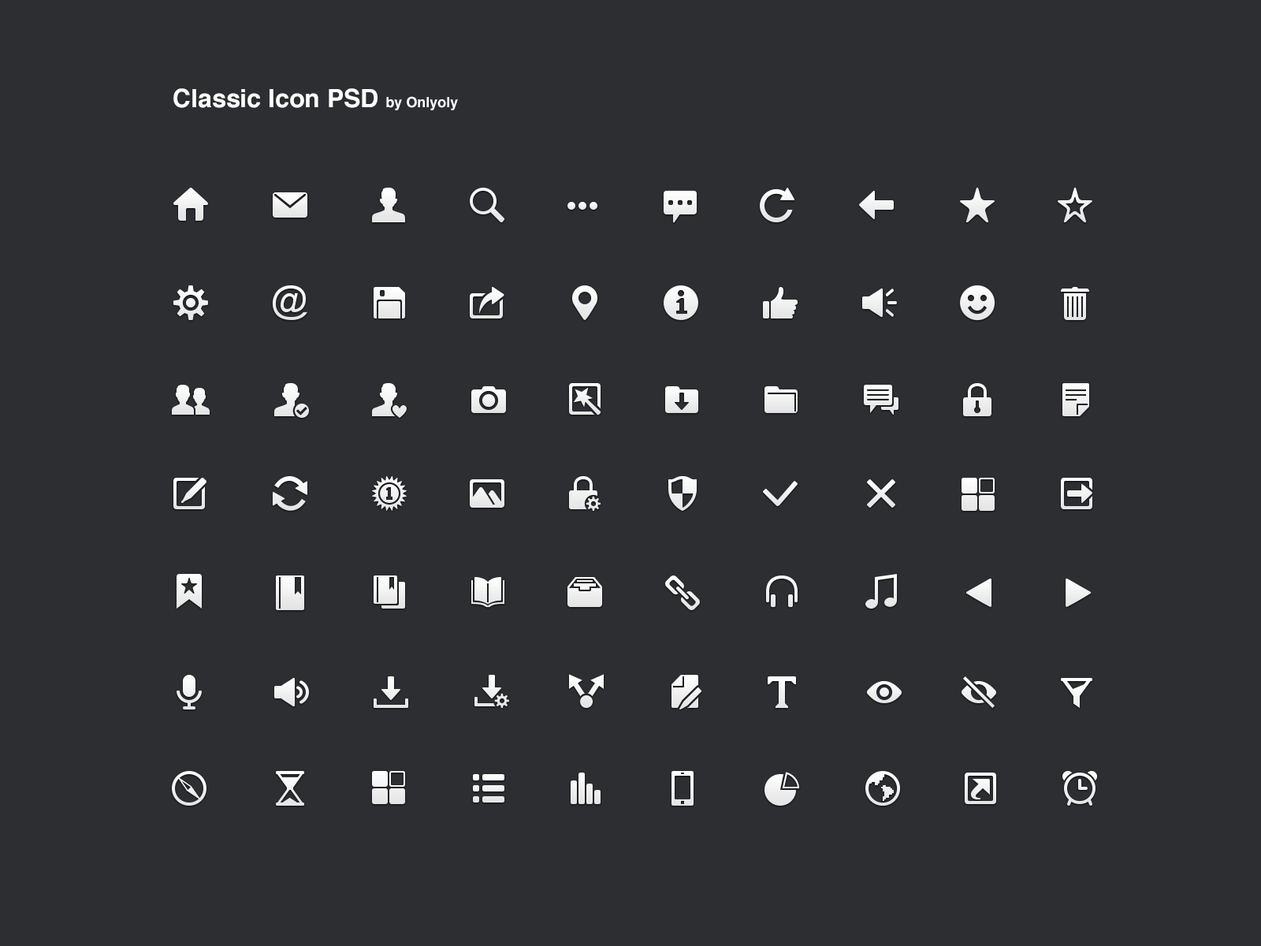
<style>
.page{position:relative;width:1261px;height:946px;background:#2c2e32}
.page>*{position:absolute;margin:0}
.t1{font:25.2px "Helvetica-Bold";color:#ffffff}
.t2{font:14.2px "Helvetica-Bold";color:#ffffff}
</style>
<div class="page">
<p class="t1" style="left:173px;top:88px;width:285px;height:22px">Classic Icon PSD <span class="t2">by Onlyoly</span></p>
</div>
